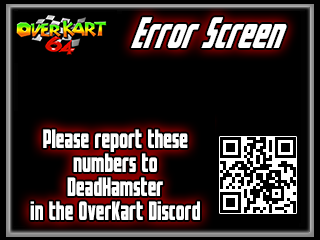
<style>
.page{position:relative;width:320px;height:240px;background:#000000}
.page>*{position:absolute;margin:0}
.t1{font:40.5px "VoyageFantastique";color:#fefefe;scale:0.74 1}
.t2{font:24.3px/24px "VoyageFantastiqueStraight";color:#fefefe;scale:0.74 1}
</style>
<div class="page">
<p class="t1" style="left:131px;top:17px;width:156px;height:31px">Error Screen</p>
<p class="t2" style="left:30px;top:129px;width:170px;height:91px;text-align:center">Please report these numbers to <br>DeadHamster <br>in the OverKart Discord Server.</p>
</div>
